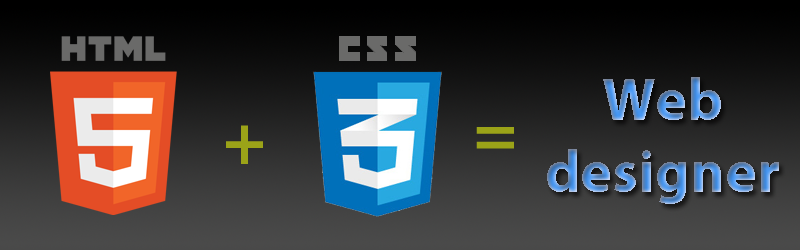
<style>
.page{position:relative;width:800px;height:250px}
.page>*{position:absolute;margin:0}
.t1{font:60px "MyriadPro-Bold"}
.t2{font:72px "MyriadPro-Bold";color:#9ba318}
</style>
<div class="page">
<p class="t1" style="left:547px;top:77px;width:232px;height:127px;text-align:center">Web<br>designer</p>
<p class="t2" style="left:226px;top:125px;width:37px;height:39px">+</p>
<p class="t2" style="left:476px;top:127px;width:38px;height:22px">=</p>
</div>
